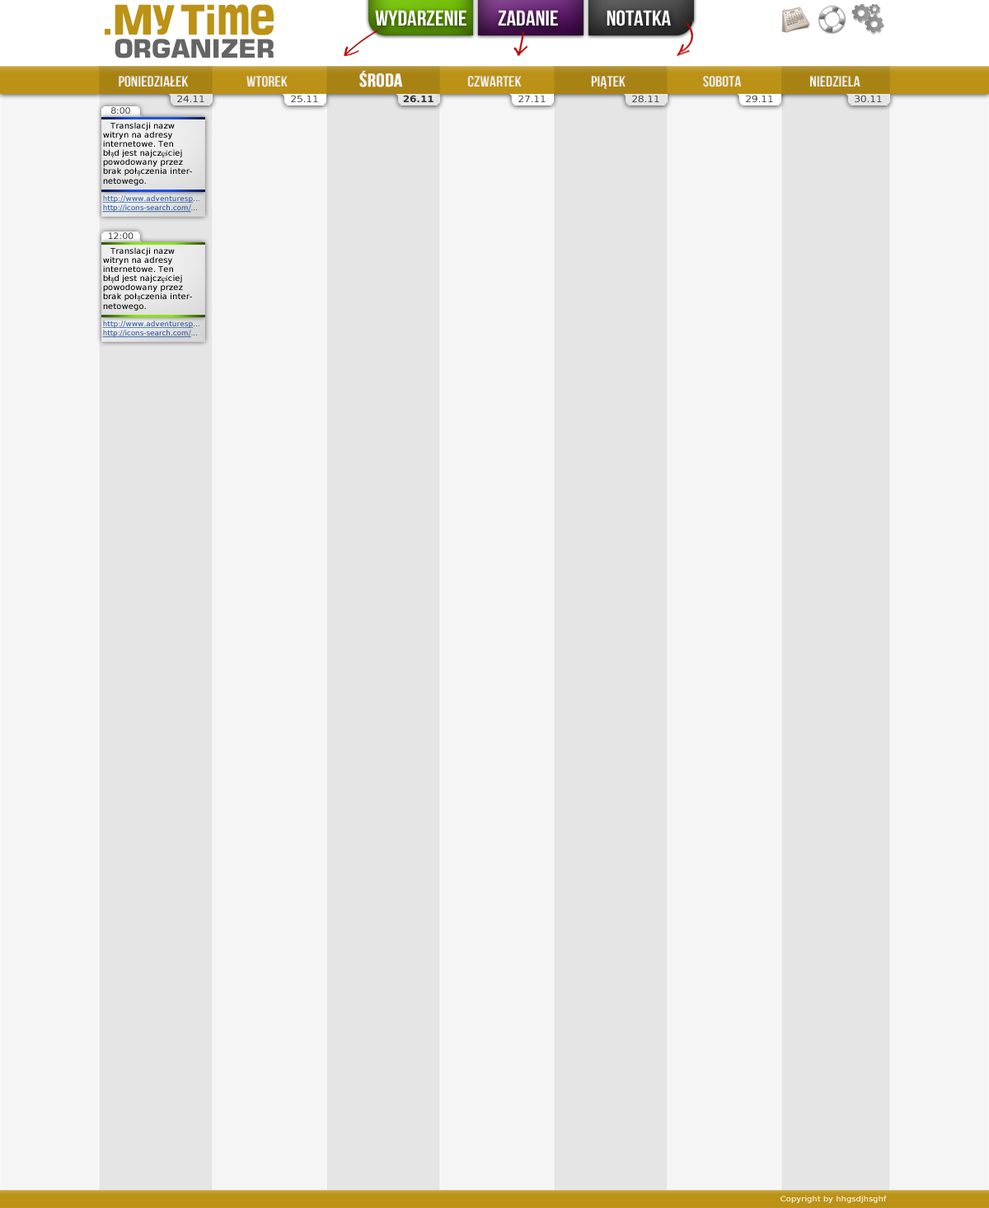
<style>
.page{position:relative;width:989px;height:1208px;background:#f5f5f5}
.page>*{position:absolute;margin:0}
.t1{font:25.5px/23.1px "Square721BT-Bold";letter-spacing:-0.02em;color:#656565}
.t2{font:41.2px/4.1px "Square721BT-Bold";letter-spacing:-0.02em;color:#bb9216}
.t3{font:57.7px/4.1px "Square721BT-Bold";letter-spacing:-0.02em;color:#bb9216;scale:0.71 1}
.t4{font:57.7px/4.1px "Square721BT-Bold";letter-spacing:-0.02em;color:#bb9216;scale:0.81 1}
.t5{font:21.4px "BebasNeue";color:#ffffff;scale:1.1 1}
.t6{font:15px "BebasNeue";color:#ffffff;scale:1.1 1}
.t7{font:18.8px "BebasNeue";color:#ffffff;font-weight:bold;scale:1.1 1}
.t8{font:9px "BitstreamVeraSans-Roman";color:#333333;scale:1.1 1}
.t9{font:9px "BitstreamVeraSans-Bold";color:#333333;scale:1.1 1}
.t10{font:8.6px "BitstreamVeraSans-Roman";color:#333333;scale:1.04 1}
.t11{font:7.8px/9.1px "BitstreamVeraSans-Roman";color:#000000;scale:1.04 1}
.t12{font:7.8px/9.1px "MinionPro-Regular";color:#000000;scale:1.04 1}
.t13{font:7.1px/9.1px "BitstreamVeraSans-Roman";color:#3661a1;text-decoration:underline;scale:1.04 1}
.t14{font:7.1px/9.1px "BitstreamVeraSans-Roman";color:#3661a1;scale:1.04 1}
.t15{font:7.5px "BitstreamVeraSans-Roman";color:#ffffff;scale:1.1 1}
</style>
<div class="page">
<p class="t1" style="left:115px;top:4px;width:159px;height:55px;text-align:justify"><span class="t2">   y<br><br>M  Ti</span><span class="t3">m</span><span class="t4">e<br> </span>ORGANIZER</p>
<p class="t5" style="left:375px;top:10px;width:91px;height:16px">WYDARZENIE</p>
<p class="t5" style="left:498px;top:10px;width:60px;height:16px">ZADANIE</p>
<p class="t5" style="left:607px;top:10px;width:64px;height:16px">NOTATKA</p>
<p class="t6" style="left:119px;top:76px;width:70px;height:11px">PONIEDZIAŁEK</p>
<p class="t6" style="left:246px;top:76px;width:42px;height:11px">WTOREK</p>
<p class="t7" style="left:359px;top:70px;width:44px;height:17px">ŚRODA</p>
<p class="t6" style="left:467px;top:76px;width:55px;height:11px">CZWARTEK</p>
<p class="t6" style="left:591px;top:76px;width:35px;height:13px">PIĄTEK</p>
<p class="t6" style="left:703px;top:76px;width:39px;height:11px">SOBOTA</p>
<p class="t6" style="left:810px;top:76px;width:50px;height:11px">NIEDZIELA</p>
<p class="t8" style="left:177px;top:95px;width:27px;height:7px">24.11</p>
<p class="t8" style="left:291px;top:95px;width:27px;height:7px">25.11</p>
<p class="t9" style="left:403px;top:95px;width:31px;height:7px">26.11</p>
<p class="t8" style="left:518px;top:95px;width:28px;height:7px">27.11</p>
<p class="t8" style="left:632px;top:95px;width:27px;height:7px">28.11</p>
<p class="t8" style="left:746px;top:95px;width:27px;height:7px">29.11</p>
<p class="t8" style="left:855px;top:95px;width:27px;height:7px">30.11</p>
<p class="t10" style="left:111px;top:107px;width:19px;height:7px">8:00</p>
<p class="t11" style="left:103px;top:122px;width:89px;height:63px">Translacji nazw witryn na adresy internetowe. Ten bł<span class="t12">ą</span>d jest najcz<span class="t12">ęś</span>ciej powodowany przez brak poł<span class="t12">ą</span>czenia internetowego.</p>
<p class="t13" style="left:102px;top:195px;width:97px;height:18px">http://www.adventuresp<span class="t14">...<br></span>http://icons-search.com/<span class="t14">...</span></p>
<p class="t10" style="left:108px;top:232px;width:26px;height:7px">12:00</p>
<p class="t11" style="left:103px;top:247px;width:89px;height:64px">Translacji nazw witryn na adresy internetowe. Ten bł<span class="t12">ą</span>d jest najcz<span class="t12">ęś</span>ciej powodowany przez brak poł<span class="t12">ą</span>czenia internetowego.</p>
<p class="t13" style="left:102px;top:321px;width:97px;height:17px">http://www.adventuresp<span class="t14">...<br></span>http://icons-search.com/<span class="t14">...</span></p>
<p class="t15" style="left:780px;top:1196px;width:107px;height:7px">Copyright by hhgsdjhsghf</p>
</div>
